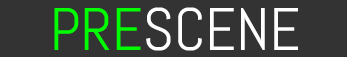
<style>
.page{position:relative;width:347px;height:57px;background:#333333}
.page>*{position:absolute;margin:0}
.t1{font:60px "Abel-Regular";color:#ffffff}
.t2{font:60px "Abel-Regular";color:#00ff00}
</style>
<div class="page">
<p class="t1" style="left:54px;top:7px;width:244px;height:44px"><span class="t2">PRE</span>SCENE</p>
</div>
